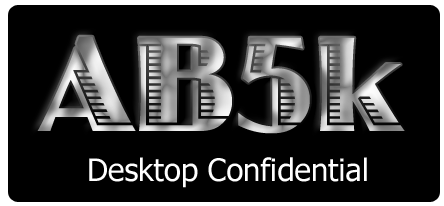
<style>
.page{position:relative;width:444px;height:206px;background:#000000}
.page>*{position:absolute;margin:0}
.t1{font:140px "JazzLetPlain"}
.t2{font:31px "Tahoma";color:#ffffff}
</style>
<div class="page">
<p class="t1" style="left:37px;top:36px;width:368px;height:98px">AB5k</p>
<p class="t2" style="left:89px;top:157px;width:278px;height:31px">Desktop Confidential</p>
</div>
